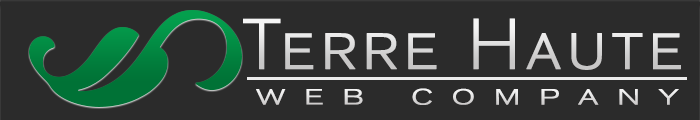
<style>
.page{position:relative;width:700px;height:120px;background:#2b2b2b}
.page>*{position:absolute;margin:0}
.t1{font:70.8px "AkzidenzGroteskBQ-LightSC";letter-spacing:0.04em;color:#d7d6d6;font-weight:bold}
.t2{font:30.2px "AkzidenzGroteskBQ-LightSC";letter-spacing:0.4em;color:#e3e2e2;font-weight:bold;scale:1.39 1}
</style>
<div class="page">
<p class="t1" style="left:243px;top:18px;width:438px;height:52px">Terre Haute</p>
<p class="t2" style="left:256px;top:88px;width:423px;height:17px">web company</p>
</div>
